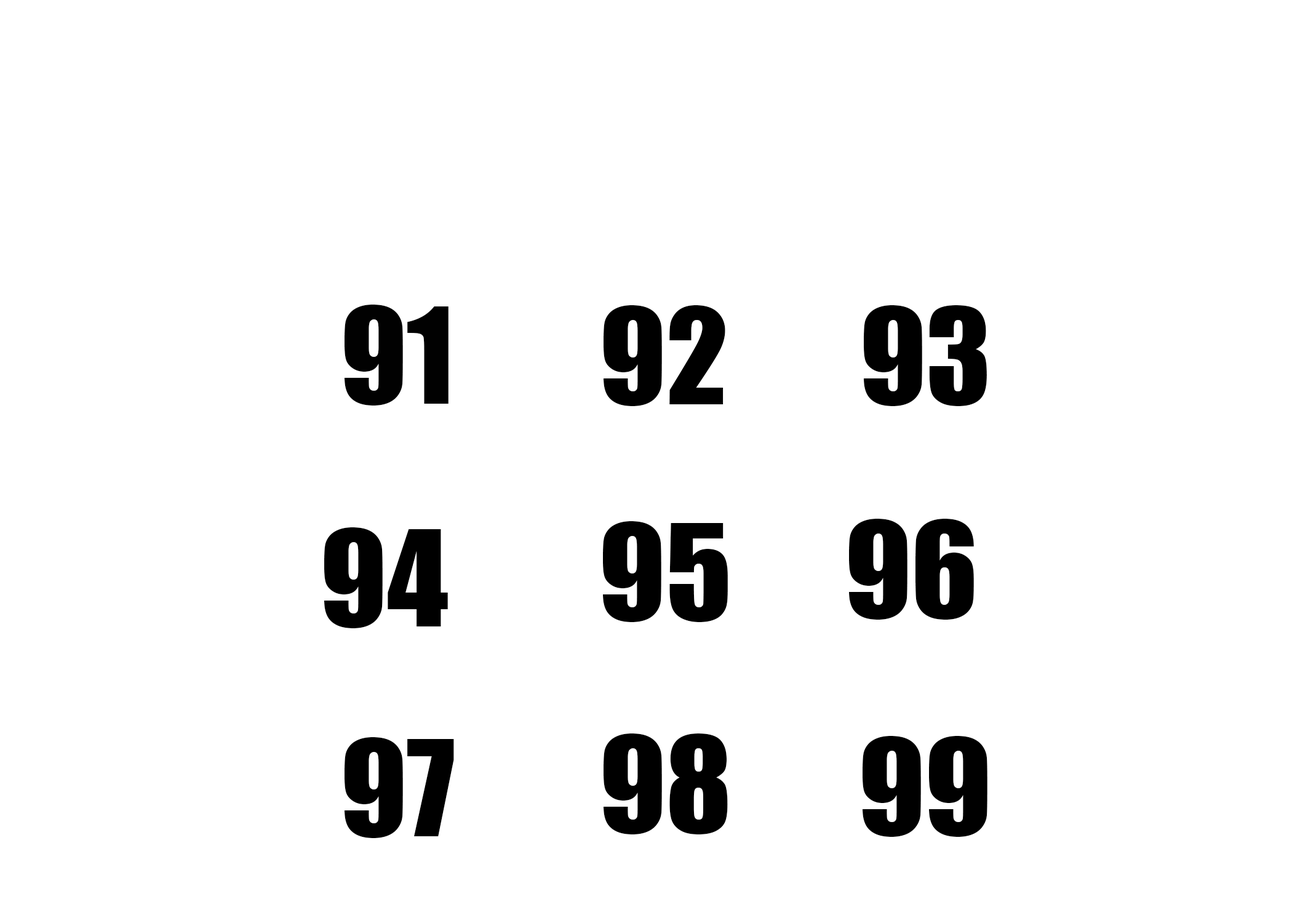
<style>
.page{position:relative;width:1292px;height:923px;background:#ffffff}
.page>*{position:absolute;margin:0}
.t1{font:123.1px "Impact";color:#010101}
.t2{font:123.1px "Impact";color:#000000}
</style>
<div class="page">
<p class="t1" style="left:345px;top:305px;width:104px;height:100px">91</p>
<p class="t2" style="left:604px;top:305px;width:121px;height:101px">92</p>
<p class="t2" style="left:864px;top:305px;width:123px;height:101px">93</p>
<p class="t2" style="left:603px;top:521px;width:125px;height:101px">95</p>
<p class="t2" style="left:849px;top:519px;width:125px;height:101px">96</p>
<p class="t2" style="left:324px;top:527px;width:124px;height:101px">94</p>
<p class="t2" style="left:345px;top:737px;width:109px;height:101px">97</p>
<p class="t2" style="left:604px;top:733px;width:124px;height:101px">98</p>
<p class="t2" style="left:863px;top:736px;width:124px;height:101px">99</p>
</div>
